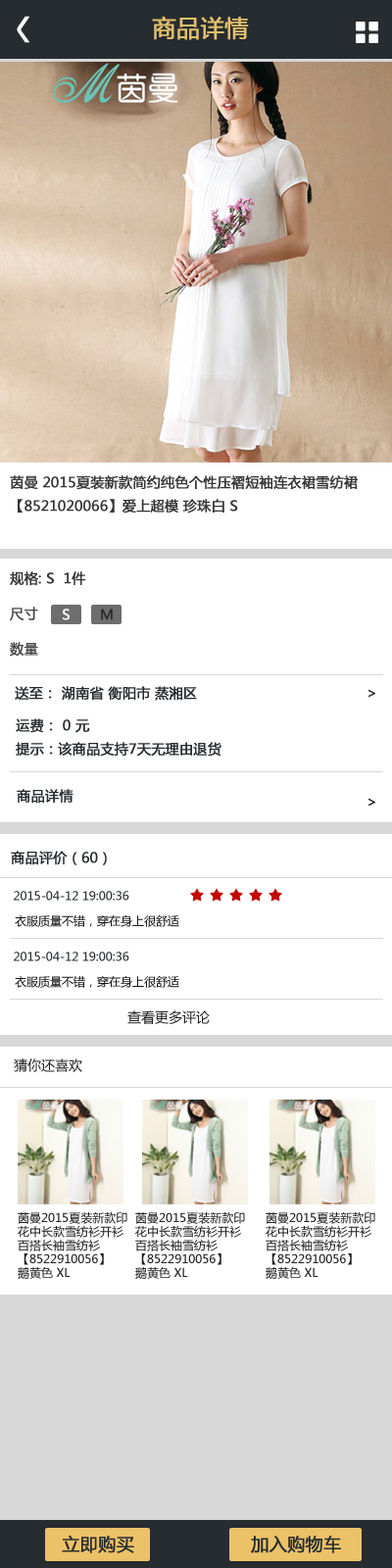
<style>
.page{position:relative;width:392px;height:1568px;background:#ffffff}
.page>*{position:absolute;margin:0}
.t1{font:29.4px "TRENDS";color:#ffffff;font-weight:bold}
.t2{font:23.5px "MicrosoftYaHei";color:#e2bf6c;font-weight:bold}
.t3{font:13.7px/23.5px "MicrosoftYaHei";color:#353535;font-weight:bold}
.t4{font:13.7px/35.3px "MicrosoftYaHei";color:#353535;font-weight:bold}
.t5{font:13.7px/35.3px "MicrosoftYaHei";color:#484848;font-weight:bold}
.t6{font:13.7px "MicrosoftYaHei";color:#ffffff;font-weight:bold}
.t7{font:13.7px "MicrosoftYaHei";color:#272c30;font-weight:bold}
.t8{font:13.7px/23.5px "MicrosoftYaHei";color:#272c30;font-weight:bold}
.t9{font:11.8px "MicrosoftYaHei";color:#272c30}
.t10{font:11.8px "MicrosoftYaHei";color:#171717}
.t11{font:13.7px "MicrosoftYaHei";color:#212121}
.t12{font:11.8px/13.7px "MicrosoftYaHei";color:#212121}
.t13{font:17.6px "MicrosoftYaHei";color:#272c30;font-weight:bold}
</style>
<div class="page">
<p class="t1" style="left:17px;top:16px;width:12px;height:27px">&lt;</p>
<p class="t2" style="left:152px;top:16px;width:97px;height:24px">商品详情</p>
<p class="t3" style="left:10px;top:475px;width:348px;height:39px">茵曼 2015夏装新款简约纯色个性压褶短袖连衣裙雪纺裙<br>【8521020066】爱上超模 珍珠白 S</p>
<p class="t4" style="left:10px;top:571px;width:76px;height:86px">规格: S  1件<br><span class="t5">尺寸<br>数量</span></p>
<p class="t6" style="left:63px;top:609px;width:7px;height:11px">S</p>
<p class="t7" style="left:101px;top:609px;width:12px;height:11px">M</p>
<p class="t7" style="left:15px;top:686px;width:182px;height:15px">送至： 湖南省 衡阳市 蒸湘区</p>
<p class="t7" style="left:368px;top:689px;width:7px;height:9px">&gt;</p>
<p class="t8" style="left:16px;top:718px;width:205px;height:39px">运费： 0 元<br>提示：该商品支持7天无理由退货</p>
<p class="t7" style="left:17px;top:789px;width:57px;height:15px">商品详情</p>
<p class="t7" style="left:368px;top:798px;width:7px;height:9px">&gt;</p>
<p class="t7" style="left:11px;top:851px;width:96px;height:14px">商品评价（60）</p>
<p class="t9" style="left:14px;top:891px;width:115px;height:10px">2015-04-12 19:00:36</p>
<p class="t10" style="left:15px;top:914px;width:164px;height:13px">衣服质量不错，穿在身上很舒适</p>
<p class="t9" style="left:14px;top:952px;width:115px;height:9px">2015-04-12 19:00:36</p>
<p class="t10" style="left:15px;top:975px;width:164px;height:13px">衣服质量不错，穿在身上很舒适</p>
<p class="t11" style="left:127px;top:1010px;width:83px;height:14px">查看更多评论</p>
<p class="t11" style="left:14px;top:1058px;width:68px;height:14px">猜你还喜欢</p>
<p class="t12" style="left:18px;top:1212px;width:109px;height:67px">茵曼2015夏装新款印<br>花中长款雪纺衫开衫<br>百搭长袖雪纺衫<br>【8522910056】 <br>鹅黄色 XL</p>
<p class="t12" style="left:135px;top:1212px;width:110px;height:67px">茵曼2015夏装新款印<br>花中长款雪纺衫开衫<br>百搭长袖雪纺衫<br>【8522910056】 <br>鹅黄色 XL</p>
<p class="t12" style="left:266px;top:1212px;width:109px;height:67px">茵曼2015夏装新款印<br>花中长款雪纺衫开衫<br>百搭长袖雪纺衫<br>【8522910056】 <br>鹅黄色 XL</p>
<p class="t13" style="left:62px;top:1535px;width:72px;height:18px">立即购买</p>
<p class="t13" style="left:251px;top:1536px;width:90px;height:17px">加入购物车</p>
</div>
